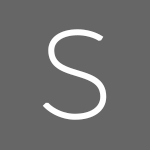
<style>
.page{position:relative;width:150px;height:150px;background:#666666}
.page>*{position:absolute;margin:0}
.t1{font:125px "Montserrat-Thin";color:#fefefe;font-weight:bold}
</style>
<div class="page">
<p class="t1" style="left:42px;top:29px;width:65px;height:91px">S</p>
</div>
